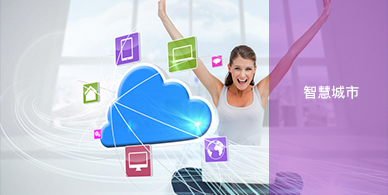
<style>
.page{position:relative;width:388px;height:195px}
.page>*{position:absolute;margin:0}
.t1{font:14px "PingFangSC-Medium";color:#fdfdfd}
</style>
<div class="page">
<p class="t1" style="left:303px;top:85px;width:56px;height:14px">智慧城市</p>
</div>
